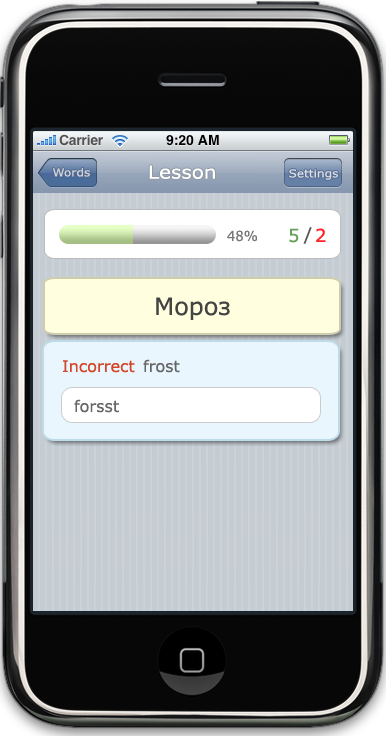
<style>
.page{position:relative;width:386px;height:742px}
.page>*{position:absolute;margin:0}
.t1{font:11px "Verdana";color:#d1d5db;scale:1.1 1}
.t2{font:18px "Verdana";color:#ffffff;scale:1.11 1}
.t3{font:11px "Verdana";color:#dbdfe5;scale:1.1 1}
.t4{font:14px "Verdana";color:#777777;scale:0.94 1}
.t5{font:18px "Verdana";color:#66a159}
.t6{font:18px "Verdana";color:#555555}
.t7{font:18px "Verdana";color:#ff2126}
.t8{font:24px "Verdana";color:#444444}
.t9{font:16px "Verdana";color:#d34526}
.t10{font:16px "Verdana";color:#666666}
</style>
<div class="page">
<p class="t1" style="left:53px;top:168px;width:37px;height:9px">Words</p>
<p class="t2" style="left:149px;top:165px;width:66px;height:14px">Lesson</p>
<p class="t3" style="left:289px;top:169px;width:49px;height:11px">Settings</p>
<p class="t4" style="left:227px;top:230px;width:30px;height:12px">48%</p>
<p class="t5" style="left:289px;top:228px;width:10px;height:15px">5</p>
<p class="t6" style="left:303px;top:227px;width:9px;height:17px">/</p>
<p class="t7" style="left:316px;top:228px;width:10px;height:14px">2</p>
<p class="t8" style="left:156px;top:297px;width:74px;height:23px">Мороз</p>
<p class="t9" style="left:63px;top:360px;width:72px;height:13px">Incorrect</p>
<p class="t10" style="left:143px;top:359px;width:37px;height:14px">frost</p>
<p class="t10" style="left:74px;top:399px;width:45px;height:14px">forsst</p>
</div>
